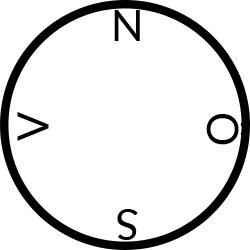
<style>
.page{position:relative;width:250px;height:250px;background:#ffffff}
.page>*{position:absolute;margin:0}
.t1{font:43px "Lato-Regular";color:#000000}
</style>
<div class="page">
<p class="t1" style="left:114px;top:10px;width:26px;height:31px">N</p>
<p class="t1" style="left:17px;top:112px;width:32px;height:29px;rotate:-90deg">V</p>
<p class="t1" style="left:206px;top:114px;width:40px;height:31px;rotate:90deg">Ö</p>
<p class="t1" style="left:117px;top:209px;width:21px;height:31px;rotate:180deg">S</p>
</div>
